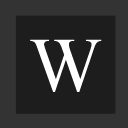
<style>
.page{position:relative;width:128px;height:128px;background:#1d1d1d}
.page>*{position:absolute;margin:0}
.t1{font:77.3px "TimesNewRomanPSMT";color:#ffffff}
</style>
<div class="page">
<p class="t1" style="left:30px;top:39px;width:72px;height:53px">W</p>
</div>
